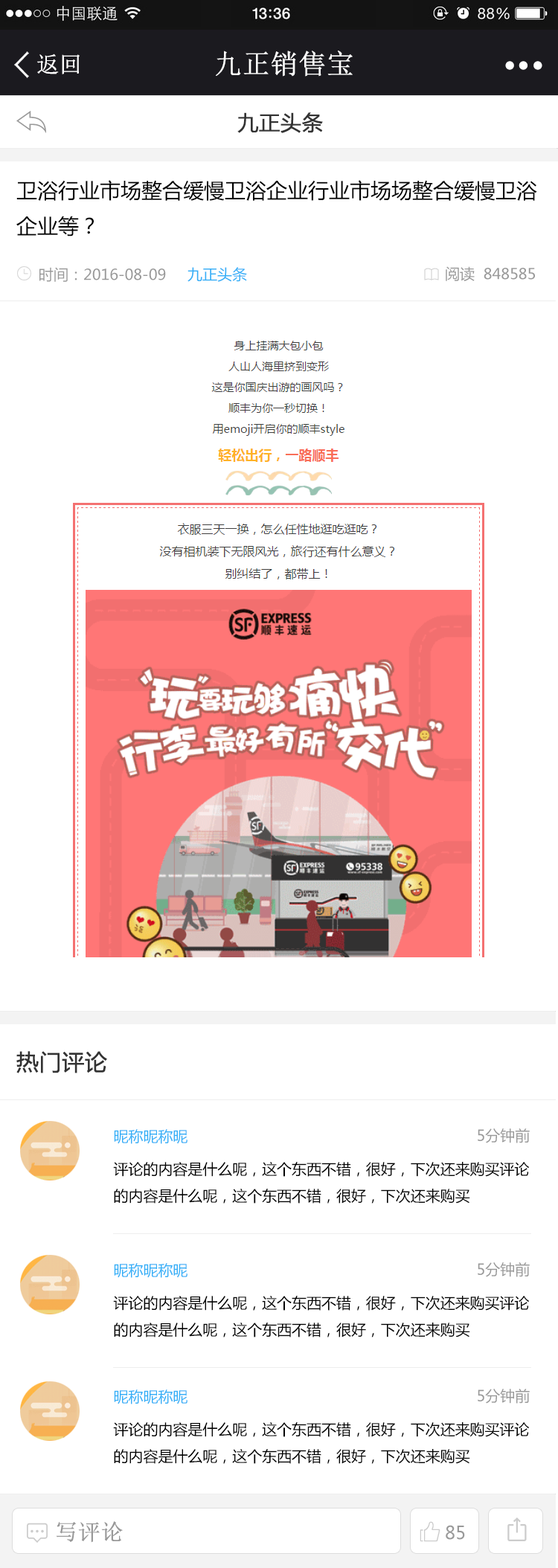
<style>
.page{position:relative;width:558px;height:1568px;background:#ffffff}
.page>*{position:absolute;margin:0}
.t1{font:22.3px "NSimSun";color:#ffffff;font-weight:bold}
.t2{font:27.3px "NSimSun";color:#ffffff;font-weight:bold}
.t3{font:20.8px "MicrosoftYaHei";color:#333333;font-weight:bold}
.t4{font:20.8px/35.7px "MicrosoftYaHei";color:#000000}
.t5{font:14.9px "MicrosoftYaHei";color:#999999}
.t6{font:14.9px "MicrosoftYaHei";color:#33aff7}
.t7{font:22.3px "MicrosoftYaHei";color:#333333;font-weight:bold}
.t8{font:14.9px/26.8px "MicrosoftYaHei";color:#000000}
.t9{font:22.3px "NSimSun";color:#999999;font-weight:bold}
.t10{font:17.9px "MicrosoftYaHei";color:#999999}
</style>
<div class="page">
<p class="t1" style="left:37px;top:54px;width:43px;height:20px">返回</p>
<p class="t2" style="left:216px;top:51px;width:137px;height:26px">九正销售宝</p>
<p class="t3" style="left:237px;top:112px;width:86px;height:21px">九正头条</p>
<p class="t4" style="left:16px;top:180px;width:521px;height:57px">卫浴行业市场整合缓慢卫浴企业行业市场场整合缓慢卫浴<br>企业等？</p>
<p class="t5" style="left:39px;top:267px;width:127px;height:15px">时间：2016-08-09</p>
<p class="t6" style="left:187px;top:267px;width:60px;height:15px">九正头条</p>
<p class="t5" style="left:446px;top:266px;width:89px;height:15px">阅读  848585</p>
<p class="t7" style="left:16px;top:1051px;width:91px;height:22px">热门评论</p>
<p class="t6" style="left:114px;top:1129px;width:73px;height:15px">昵称昵称昵</p>
<p class="t5" style="left:478px;top:1128px;width:52px;height:15px">5分钟前</p>
<p class="t8" style="left:113px;top:1162px;width:417px;height:42px">评论的内容是什么呢，这个东西不错，很好，下次还来购买评论<br>的内容是什么呢，这个东西不错，很好，下次还来购买</p>
<p class="t6" style="left:114px;top:1263px;width:73px;height:15px">昵称昵称昵</p>
<p class="t5" style="left:478px;top:1262px;width:52px;height:15px">5分钟前</p>
<p class="t8" style="left:113px;top:1296px;width:417px;height:41px">评论的内容是什么呢，这个东西不错，很好，下次还来购买评论<br>的内容是什么呢，这个东西不错，很好，下次还来购买</p>
<p class="t6" style="left:114px;top:1389px;width:73px;height:15px">昵称昵称昵</p>
<p class="t5" style="left:478px;top:1389px;width:52px;height:15px">5分钟前</p>
<p class="t8" style="left:113px;top:1422px;width:417px;height:42px">评论的内容是什么呢，这个东西不错，很好，下次还来购买评论<br>的内容是什么呢，这个东西不错，很好，下次还来购买</p>
<p class="t9" style="left:56px;top:1521px;width:67px;height:22px">写评论</p>
<p class="t10" style="left:446px;top:1525px;width:19px;height:15px">85</p>
</div>
